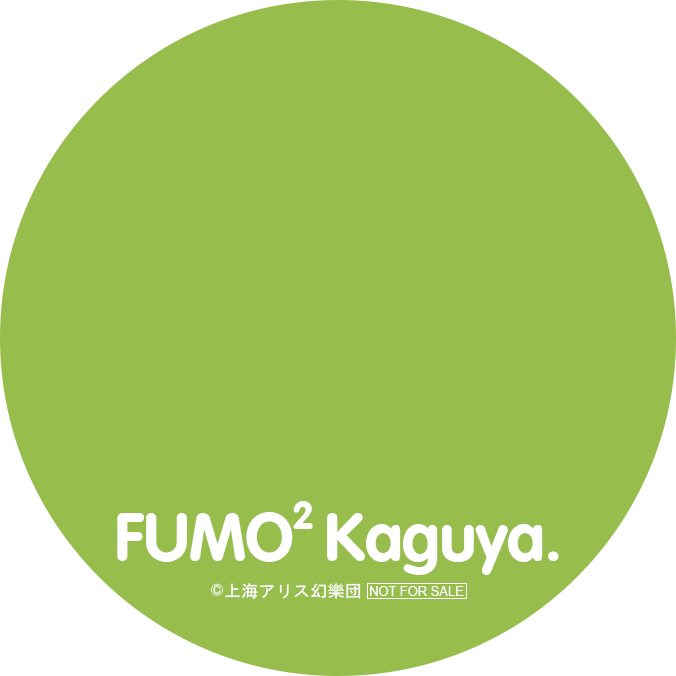
<style>
.page{position:relative;width:676px;height:676px;background:#97bd4d}
.page>*{position:absolute;margin:0}
.t1{font:40px "VagRoundedBold";color:#ffffff}
.t2{font:68px "VagRoundedBold";color:#ffffff}
.t3{font:12px "MS-Gothic";color:#ffffff}
.t4{font:17.1px "MS-Gothic";color:#ffffff}
.t5{font:12.7px "ArialMT";color:#ffffff}
</style>
<div class="page">
<p class="t1" style="left:293px;top:501px;width:20px;height:28px">2</p>
<p class="t2" style="left:117px;top:512px;width:442px;height:63px">FUMO  Kaguya.</p>
<p class="t3" style="left:211px;top:583px;width:12px;height:13px">Ⓒ</p>
<p class="t4" style="left:225px;top:583px;width:136px;height:16px">上海アリス幻樂団</p>
<p class="t5" style="left:370px;top:586px;width:94px;height:10px">NOT FOR SALE</p>
</div>
